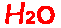
<style>
.page{position:relative;width:61px;height:28px;background:#ffffff}
.page>*{position:absolute;margin:0}
.t1{font:26px "SegoeScript";color:#ff0000;font-weight:bold}
.t2{font:18px "Shruti-Bold";color:#ff0000;font-weight:bold}
.t3{font:26px "Shruti-Bold";color:#ff0000;font-weight:bold}
</style>
<div class="page">
<p class="t1" style="left:5px;top:2px;width:50px;height:22px">H<span class="t2">2</span><span class="t3">O</span></p>
</div>
